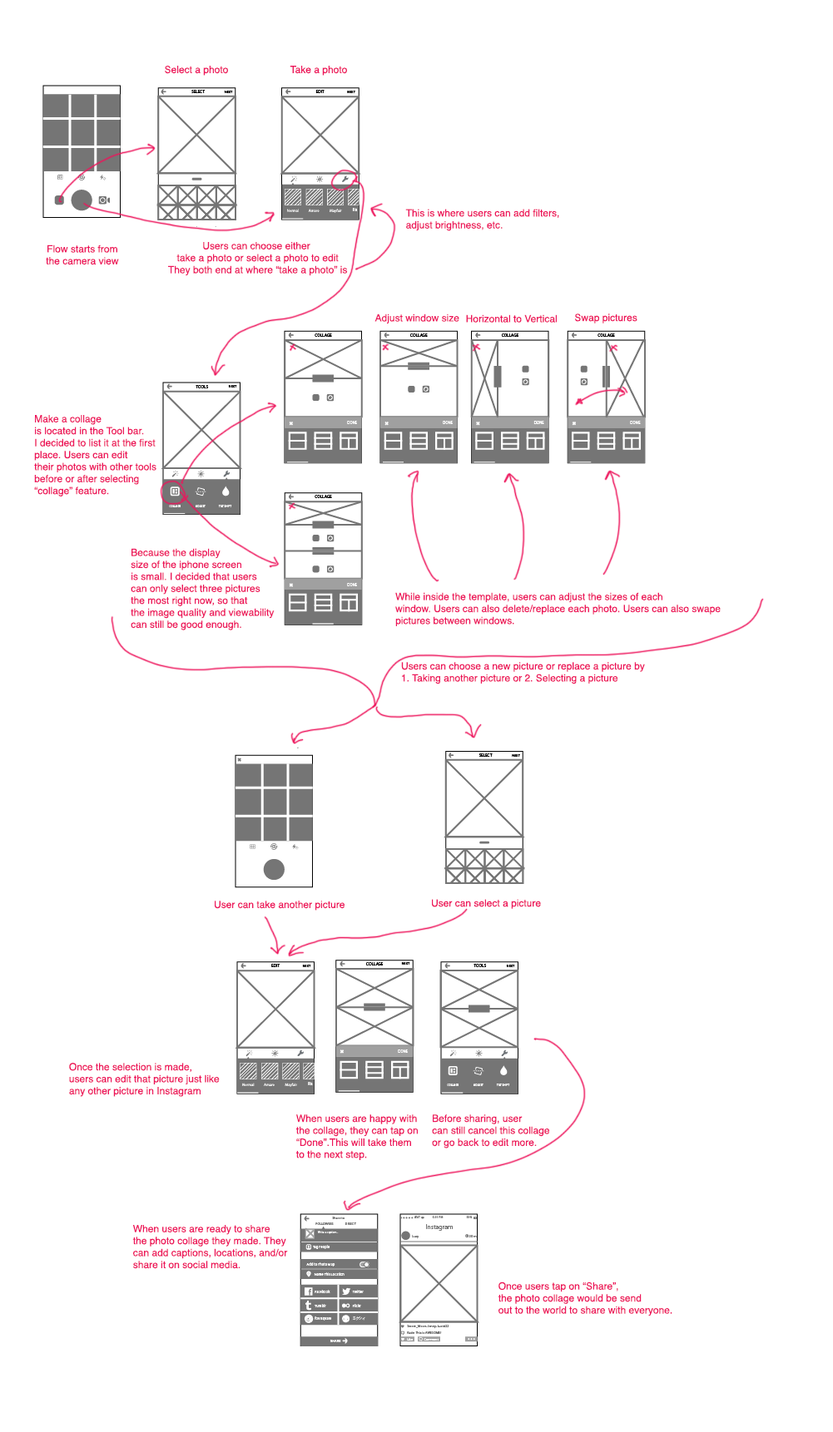
<style>
.page{position:relative;width:833px;height:1432px;background:#ffffff}
.page>*{position:absolute;margin:0}
.t1{font:10px "Helvetica";color:#ed145b}
</style>
<div class="page">
<p class="t1" style="left:165px;top:66px;width:63px;height:10px">Select a photo</p>
<p class="t1" style="left:289px;top:66px;width:58px;height:10px">Take a photo</p>
<p class="t1" style="left:405px;top:209px;width:154px;height:22px">This is where users can add filters, <br>adjust brightness, etc.</p>
<p class="t1" style="left:46px;top:245px;width:73px;height:20px;text-align:center">Flow starts from<br>the camera view</p>
<p class="t1" style="left:168px;top:242px;width:180px;height:34px;text-align:center">Users can choose either <br>take a photo or select a photo to edit<br>They both end at where “take a photo” is</p>
<p class="t1" style="left:374px;top:314px;width:85px;height:10px">Adjust window size</p>
<p class="t1" style="left:466px;top:314px;width:90px;height:9px">Horizontal to Vertical</p>
<p class="t1" style="left:574px;top:314px;width:63px;height:10px">Swap pictures</p>
<p class="t1" style="left:34px;top:415px;width:122px;height:82px">Make a collage<br>is located in the Tool bar.<br>I decided to list it at the first<br>place. Users can edit<br>their photos with other tools<br>before or after selecting<br>“collage” feature.</p>
<p class="t1" style="left:131px;top:548px;width:143px;height:82px">Because the display<br>size of the iphone screen<br>is small. I decided that users<br>can only select three pictures <br>the most right now, so that <br>the image quality and viewability<br>can still be good enough.</p>
<p class="t1" style="left:395px;top:592px;width:325px;height:34px">While inside the template, users can adjust the sizes of each<br>window. Users can also delete/replace each photo. Users can also swape <br>pictures between windows.</p>
<p class="t1" style="left:401px;top:662px;width:244px;height:23px">Users can choose a new picture or replace a picture by <br>1. Taking another picture or 2. Selecting a picture</p>
<p class="t1" style="left:215px;top:901px;width:129px;height:10px">User can take another picture</p>
<p class="t1" style="left:432px;top:899px;width:109px;height:10px">User can select a picture</p>
<p class="t1" style="left:69px;top:1063px;width:151px;height:34px">Once the selection is made,<br>users can edit that picture just like<br>any other picture in Instagram</p>
<p class="t1" style="left:296px;top:1115px;width:122px;height:45px">When users are happy with<br>the collage, they can tap on <br>“Done”.This will take them <br>to the next step.</p>
<p class="t1" style="left:432px;top:1115px;width:117px;height:34px">Before sharing, user <br>can still cancel this collage<br>or go back to edit more.</p>
<p class="t1" style="left:132px;top:1225px;width:156px;height:44px">When users are ready to share<br>the photo collage they made. They<br>can add captions, locations, and/or<br>share it on social media.</p>
<p class="t1" style="left:497px;top:1282px;width:175px;height:35px">Once users tap on “Share”,<br>the photo collage would be send <br>out to the world to share with everyone.</p>
</div>
